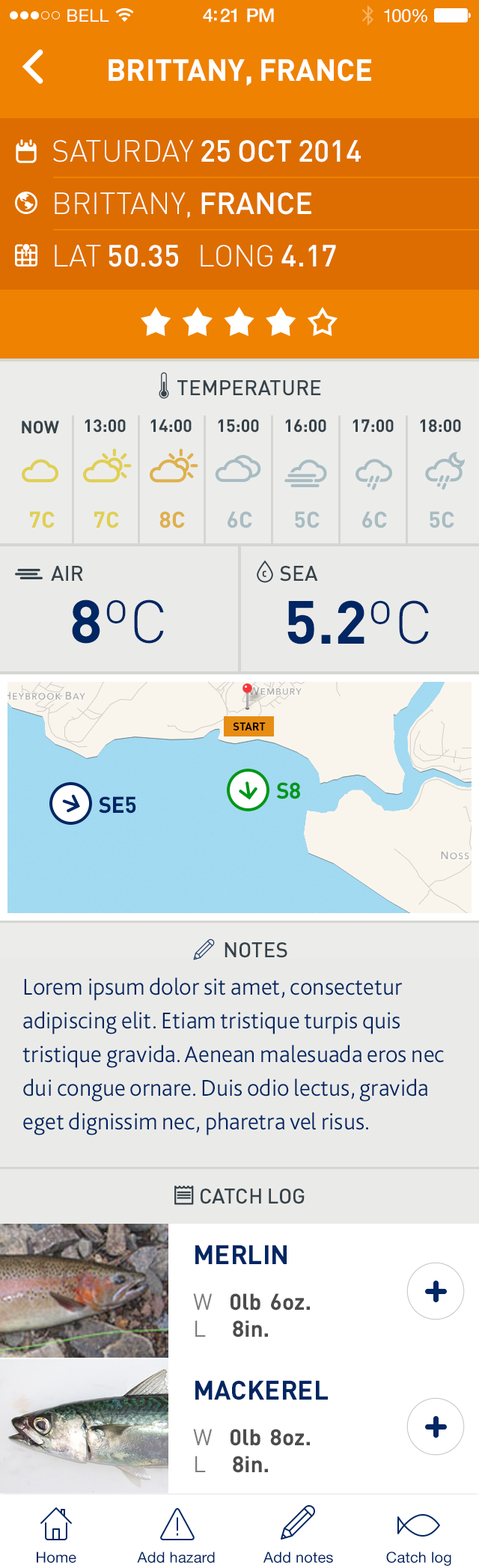
<style>
.page{position:relative;width:479px;height:1568px;background:#eaebe9}
.page>*{position:absolute;margin:0}
.t1{font:17.2px "HelveticaNeue";letter-spacing:0.02em;color:#ffffff}
.t2{font:18.7px "HelveticaNeue-Medium";letter-spacing:-0.02em;color:#ffffff}
.t3{font:18px "HelveticaNeue";letter-spacing:-0.02em;color:#ffffff}
.t4{font:29.9px "DIN-Bold";color:#ffffff;text-transform:uppercase}
.t5{font:29.9px/52.4px "DIN-Medium";color:#ffffff;text-transform:uppercase}
.t6{font:29.9px/52.4px "DIN-Light";color:#ffffff;text-transform:uppercase}
.t7{font:21px "DIN-Medium";color:#36424a;text-transform:uppercase}
.t8{font:17.3px "DIN-Bold";color:#36424a;text-transform:uppercase}
.t9{font:22.5px "DIN-Bold";color:#e0cf54}
.t10{font:22.5px "DIN-Bold";color:#dfaf4d}
.t11{font:22.5px "DIN-Bold";color:#a8bcc2}
.t12{font:9px "DIN-BlackAlternate";color:#36424a;text-transform:uppercase}
.t13{font:59.9px "DIN-Light";color:#002663}
.t14{font:59.9px "DIN-Bold";color:#002663;text-transform:uppercase}
.t15{font:11.2px "DIN-Bold";letter-spacing:-0.015em;color:#000000;text-transform:uppercase}
.t16{font:22.5px "DIN-Bold";letter-spacing:-0.015em;color:#009619;text-transform:uppercase}
.t17{font:22.5px "DIN-Bold";letter-spacing:-0.015em;color:#002663;text-transform:uppercase}
.t18{font:24px/33.7px "Bliss2-Light";color:#002663}
.t19{font:22.5px "DIN-Bold";color:#4c4c4c}
.t20{font:26.2px "DIN-Bold";color:#002663;text-transform:uppercase}
.t21{font:22.5px "DIN-Regular";color:#7d7d7d}
.t22{font:15px "HelveticaNeue";letter-spacing:0.01em;color:#002663}
</style>
<div class="page">
<p class="t1" style="left:67px;top:9px;width:42px;height:13px">BELL</p>
<p class="t2" style="left:203px;top:8px;width:71px;height:14px">4:21 PM</p>
<p class="t3" style="left:384px;top:9px;width:43px;height:13px">100%</p>
<p class="t4" style="left:109px;top:59px;width:262px;height:27px">Brittany, france</p>
<p class="t5" style="left:53px;top:140px;width:308px;height:127px"><span class="t6">Saturday </span>25 Oct 2014<br><span class="t6">Brittany, </span>France<br><span class="t6">LAT </span>50.35<span class="t6">   LONG </span>4.17</p>
<p class="t7" style="left:177px;top:380px;width:144px;height:16px">temperature</p>
<p class="t8" style="left:22px;top:421px;width:37px;height:13px">NOW</p>
<p class="t8" style="left:85px;top:419px;width:41px;height:14px">13:00</p>
<p class="t8" style="left:150px;top:419px;width:42px;height:14px">14:00</p>
<p class="t8" style="left:218px;top:419px;width:41px;height:14px">15:00</p>
<p class="t8" style="left:285px;top:419px;width:41px;height:14px">16:00</p>
<p class="t8" style="left:353px;top:419px;width:41px;height:14px">17:00</p>
<p class="t8" style="left:420px;top:419px;width:41px;height:14px">18:00</p>
<p class="t9" style="left:30px;top:511px;width:25px;height:17px">7C</p>
<p class="t9" style="left:94px;top:511px;width:25px;height:17px">7C</p>
<p class="t10" style="left:159px;top:511px;width:26px;height:17px">8C</p>
<p class="t11" style="left:228px;top:511px;width:24px;height:17px">6C</p>
<p class="t11" style="left:295px;top:511px;width:25px;height:17px">5C</p>
<p class="t11" style="left:362px;top:511px;width:25px;height:17px">6C</p>
<p class="t11" style="left:430px;top:511px;width:24px;height:17px">5C</p>
<p class="t7" style="left:51px;top:566px;width:32px;height:15px">air</p>
<p class="t7" style="left:280px;top:566px;width:38px;height:16px">sea</p>
<p class="t12" style="left:262px;top:570px;width:5px;height:7px">C</p>
<p class="t13" style="left:72px;top:600px;width:92px;height:44px"><span class="t14">8</span>ºC</p>
<p class="t14" style="left:287px;top:600px;width:142px;height:44px">5.2<span class="t13">ºC</span></p>
<p class="t15" style="left:233px;top:722px;width:33px;height:8px">START</p>
<p class="t16" style="left:276px;top:782px;width:24px;height:17px">S8</p>
<p class="t17" style="left:99px;top:796px;width:37px;height:18px">SE5</p>
<p class="t7" style="left:225px;top:942px;width:62px;height:16px">Notes</p>
<p class="t18" style="left:22px;top:977px;width:422px;height:158px">Lorem ipsum dolor sit amet, consectetur adipiscing elit. Etiam tristique turpis quis tristique gravida. Aenean malesuada eros nec dui congue ornare. Duis odio lectus, gravida eget dignissim nec, pharetra vel risus.</p>
<p class="t7" style="left:201px;top:1189px;width:104px;height:15px">catch log</p>
<p class="t19" style="left:193px;top:1245px;width:117px;height:92px"><span class="t20">Merlin<br></span><span class="t21">W    </span>0lb  6oz.<br><span class="t21">L      </span>8in.</p>
<p class="t19" style="left:193px;top:1380px;width:135px;height:93px"><span class="t20">mackerel<br></span><span class="t21">W    </span>0lb  8oz.<br><span class="t21">L      </span>8in.</p>
<p class="t22" style="left:37px;top:1552px;width:39px;height:11px">Home</p>
<p class="t22" style="left:137px;top:1552px;width:78px;height:11px">Add hazard</p>
<p class="t22" style="left:263px;top:1552px;width:70px;height:11px">Add notes</p>
<p class="t22" style="left:386px;top:1552px;width:65px;height:14px">Catch log</p>
</div>
